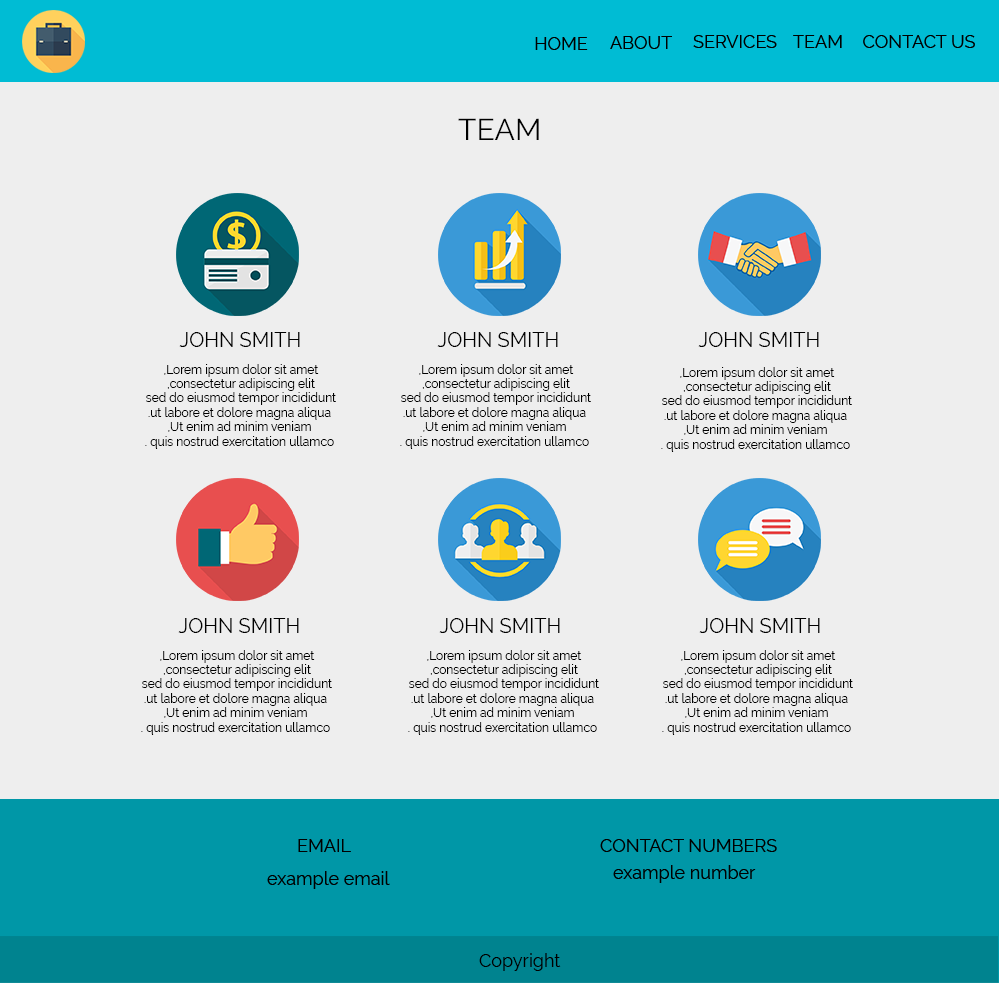
<style>
.page{position:relative;width:999px;height:984px;background:#eeeeee}
.page>*{position:absolute;margin:0}
.t1{font:30px "Raleway-Regular";color:#000000}
.t2{font:20px "Raleway-Regular";color:#000000}
.t3{font:12px "Raleway-Regular";color:#000000}
</style>
<div class="page">
<p class="t1" style="left:458px;top:118px;width:81px;height:22px">TEAM</p>
<p class="t2" style="left:179px;top:332px;width:121px;height:15px">JOHN SMITH</p>
<p class="t2" style="left:437px;top:332px;width:121px;height:15px">JOHN SMITH</p>
<p class="t2" style="left:698px;top:332px;width:121px;height:15px">JOHN SMITH</p>
<p class="t3" style="left:145px;top:364px;width:191px;height:85px;text-align:center">Lorem ipsum dolor sit amet, <br>consectetur adipiscing elit, <br>sed do eiusmod tempor incididunt <br>ut labore et dolore magna aliqua.<br> Ut enim ad minim veniam, <br>quis nostrud exercitation ullamco .</p>
<p class="t3" style="left:400px;top:364px;width:191px;height:85px;text-align:center">Lorem ipsum dolor sit amet, <br>consectetur adipiscing elit, <br>sed do eiusmod tempor incididunt <br>ut labore et dolore magna aliqua.<br> Ut enim ad minim veniam, <br>quis nostrud exercitation ullamco .</p>
<p class="t3" style="left:661px;top:367px;width:191px;height:85px;text-align:center">Lorem ipsum dolor sit amet, <br>consectetur adipiscing elit, <br>sed do eiusmod tempor incididunt <br>ut labore et dolore magna aliqua.<br> Ut enim ad minim veniam, <br>quis nostrud exercitation ullamco .</p>
<p class="t2" style="left:178px;top:618px;width:121px;height:15px">JOHN SMITH</p>
<p class="t2" style="left:439px;top:618px;width:121px;height:15px">JOHN SMITH</p>
<p class="t2" style="left:699px;top:618px;width:121px;height:15px">JOHN SMITH</p>
<p class="t3" style="left:141px;top:650px;width:191px;height:85px;text-align:center">Lorem ipsum dolor sit amet, <br>consectetur adipiscing elit, <br>sed do eiusmod tempor incididunt <br>ut labore et dolore magna aliqua.<br> Ut enim ad minim veniam, <br>quis nostrud exercitation ullamco .</p>
<p class="t3" style="left:408px;top:650px;width:191px;height:85px;text-align:center">Lorem ipsum dolor sit amet, <br>consectetur adipiscing elit, <br>sed do eiusmod tempor incididunt <br>ut labore et dolore magna aliqua.<br> Ut enim ad minim veniam, <br>quis nostrud exercitation ullamco .</p>
<p class="t3" style="left:662px;top:650px;width:191px;height:85px;text-align:center">Lorem ipsum dolor sit amet, <br>consectetur adipiscing elit, <br>sed do eiusmod tempor incididunt <br>ut labore et dolore magna aliqua.<br> Ut enim ad minim veniam, <br>quis nostrud exercitation ullamco .</p>
</div>
